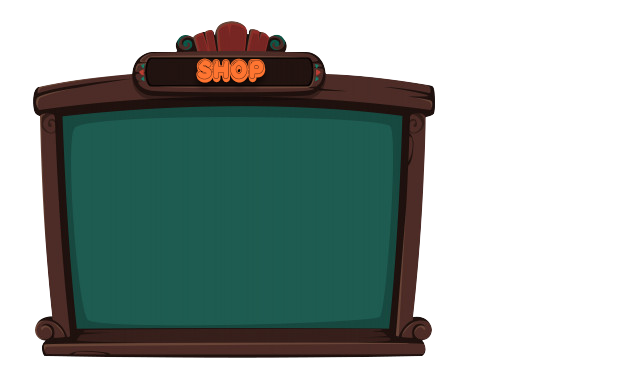
<style>
.page{position:relative;width:626px;height:375px;background:#ffffff}
.page>*{position:absolute;margin:0}
.t1{font:32px "Reglisse";color:#ff7531}
</style>
<div class="page">
<p class="t1" style="left:196px;top:58px;width:70px;height:25px">SHOP</p>
</div>
